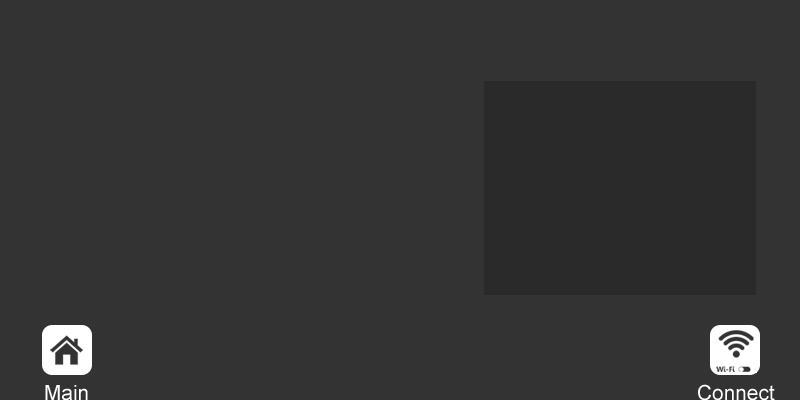
<style>
.page{position:relative;width:800px;height:400px;background:#333333}
.page>*{position:absolute;margin:0}
.t1{font:20.8px "ArialMT";color:#ffffff}
</style>
<div class="page">
<p class="t1" style="left:45px;top:385px;width:43px;height:16px">Main</p>
<p class="t1" style="left:698px;top:384px;width:77px;height:17px">Connect</p>
</div>
